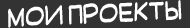
<style>
.page{position:relative;width:190px;height:28px;background:#333333}
.page>*{position:absolute;margin:0}
.t1{font:30px "SuplexmentaryComicNC";color:#ffffff;scale:0.8 1}
</style>
<div class="page">
<p class="t1" style="left:8px;top:0px;width:174px;height:28px;rotate:-3deg">МОИ ПРОЕКТЫ</p>
</div>
